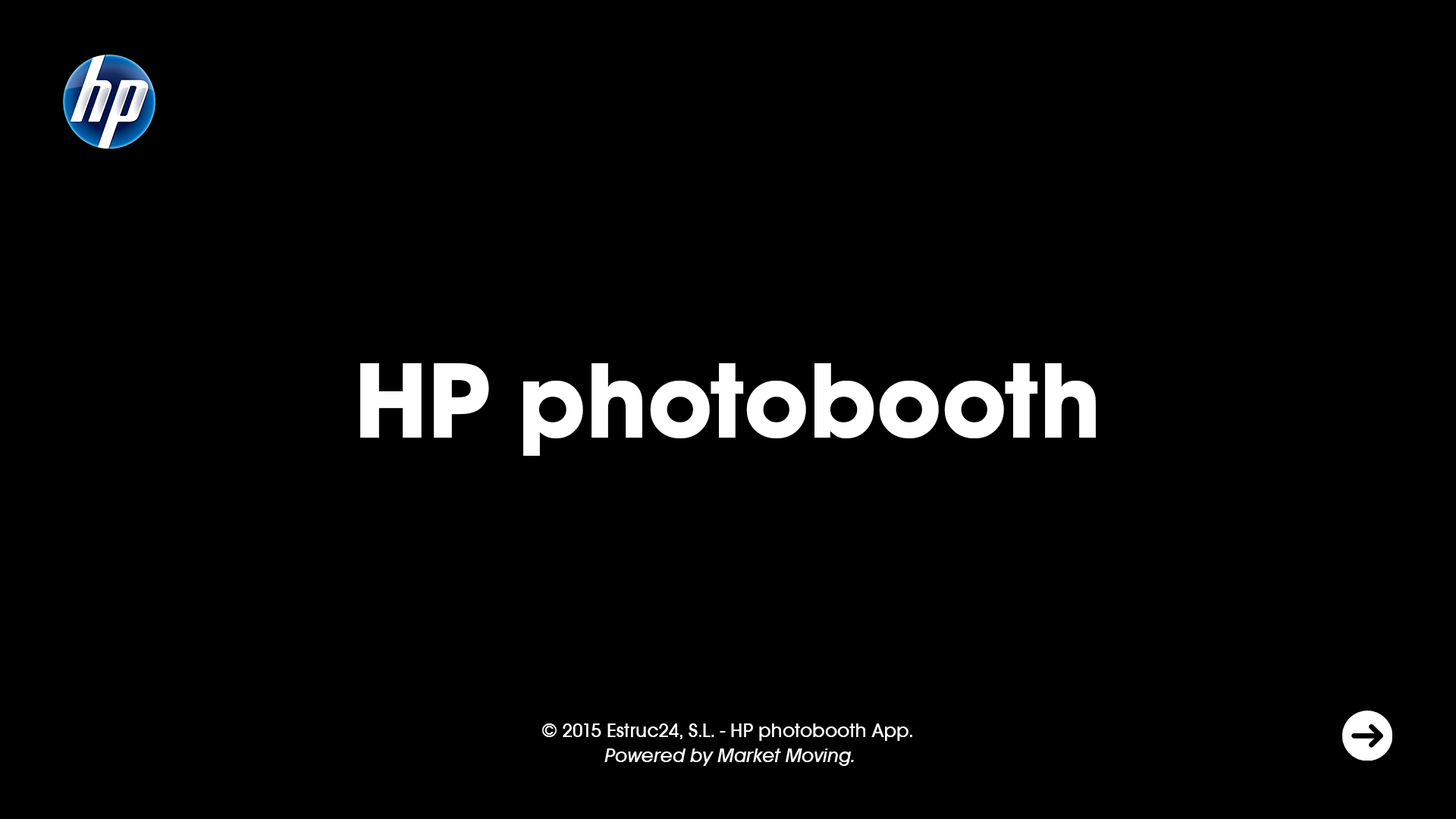
<style>
.page{position:relative;width:1456px;height:819px;background:#000000}
.page>*{position:absolute;margin:0}
.t1{font:109.2px "AvantGardeMdITCTTBold";color:#ffffff}
.t2{font:20.5px/25px "AvantGardeMdITCTT";color:#ffffff}
.t3{font:20.5px/25px "AvantGardeMdITCTTOblique";color:#ffffff}
</style>
<div class="page">
<p class="t1" style="left:360px;top:363px;width:736px;height:93px">HP photobooth</p>
<p class="t2" style="left:542px;top:723px;width:370px;height:43px;text-align:center">© 2015 Estruc24, S.L. - HP photobooth App. <br><span class="t3">Powered by Market Moving.</span></p>
</div>
